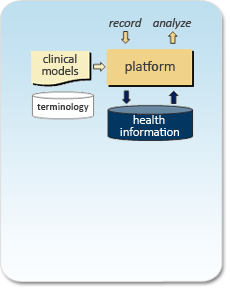
<style>
.page{position:relative;width:230px;height:290px}
.page>*{position:absolute;margin:0}
.t1{font:12.5px "Calibri-Italic";color:#3c3c3c}
.t2{font:12.5px "Calibri";color:#3c3c3c}
.t3{font:14.6px "Calibri";color:#3c3c3c}
.t4{font:10.4px "Calibri";color:#3c3c3c}
.t5{font:12.5px "Calibri";color:#ffffff}
</style>
<div class="page">
<p class="t1" style="left:109px;top:18px;width:33px;height:9px">record</p>
<p class="t1" style="left:153px;top:18px;width:39px;height:11px">analyze</p>
<p class="t2" style="left:43px;top:54px;width:34px;height:9px">clinical</p>
<p class="t3" style="left:125px;top:61px;width:50px;height:13px">platform</p>
<p class="t2" style="left:42px;top:66px;width:37px;height:9px">models</p>
<p class="t4" style="left:37px;top:103px;width:52px;height:9px">terminology</p>
<p class="t5" style="left:133px;top:115px;width:32px;height:9px">health</p>
<p class="t5" style="left:120px;top:127px;width:59px;height:9px">information</p>
</div>
